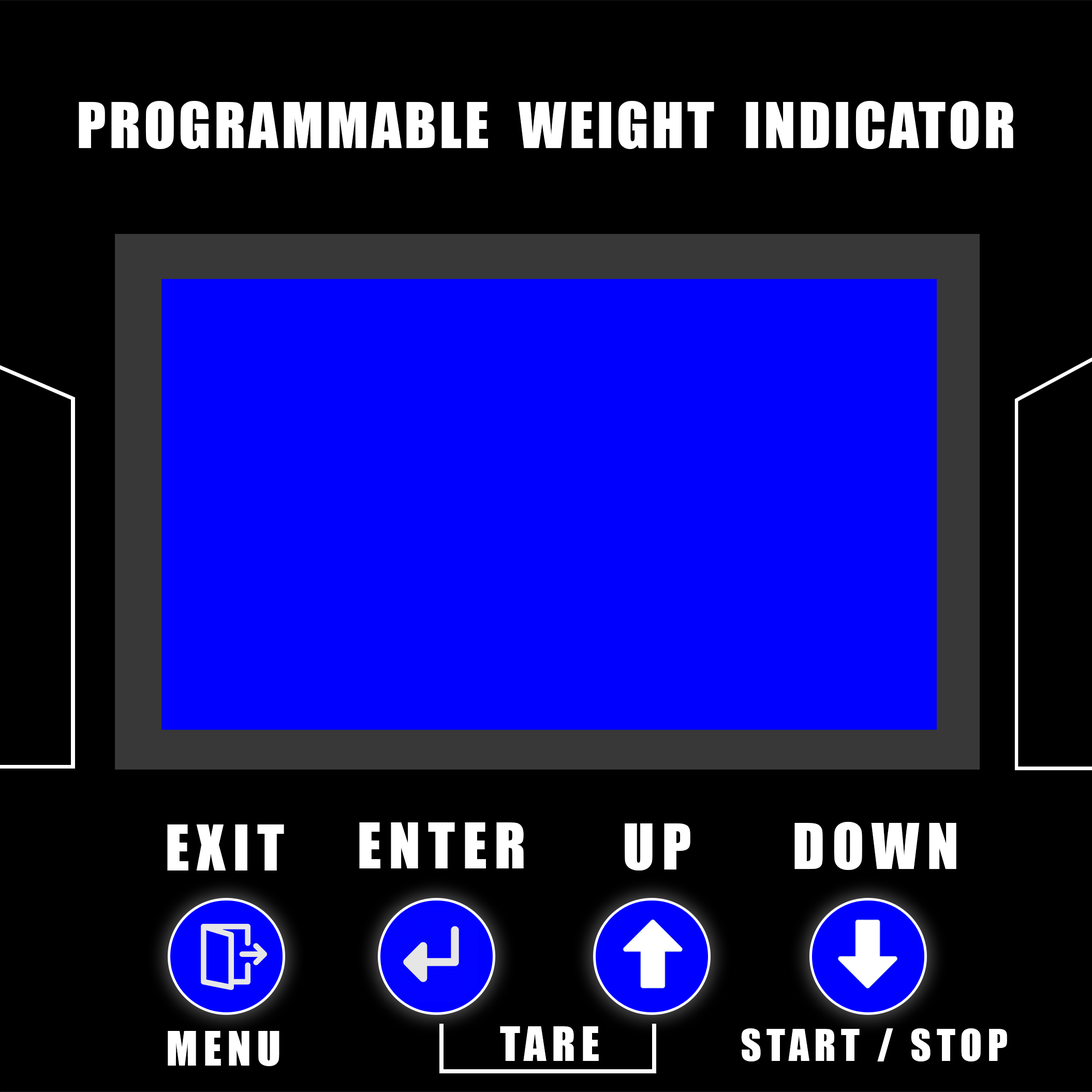
<style>
.page{position:relative;width:1092px;height:1092px;background:#000000}
.page>*{position:absolute;margin:0}
.t1{font:58.7px "Impact";letter-spacing:0.05em;color:#ffffff}
.t2{font:58.4px "Impact";letter-spacing:0.13em;color:#ffffff}
.t3{font:43.8px "Impact";letter-spacing:0.13em;color:#ffffff}
.t4{font:40.2px "Impact";letter-spacing:0.13em;color:#ffffff}
</style>
<div class="page">
<p class="t1" style="left:79px;top:101px;width:934px;height:48px">PROGRAMMABLE  WEIGHT  INDICATOR</p>
<p class="t2" style="left:794px;top:822px;width:162px;height:48px">DOWN</p>
<p class="t2" style="left:167px;top:824px;width:117px;height:46px">EXIT</p>
<p class="t2" style="left:359px;top:822px;width:165px;height:46px">ENTER</p>
<p class="t2" style="left:625px;top:823px;width:65px;height:47px">UP</p>
<p class="t3" style="left:168px;top:1031px;width:111px;height:35px">MENU</p>
<p class="t3" style="left:500px;top:1026px;width:99px;height:35px">TARE</p>
<p class="t4" style="left:741px;top:1028px;width:266px;height:33px">START / STOP</p>
</div>
